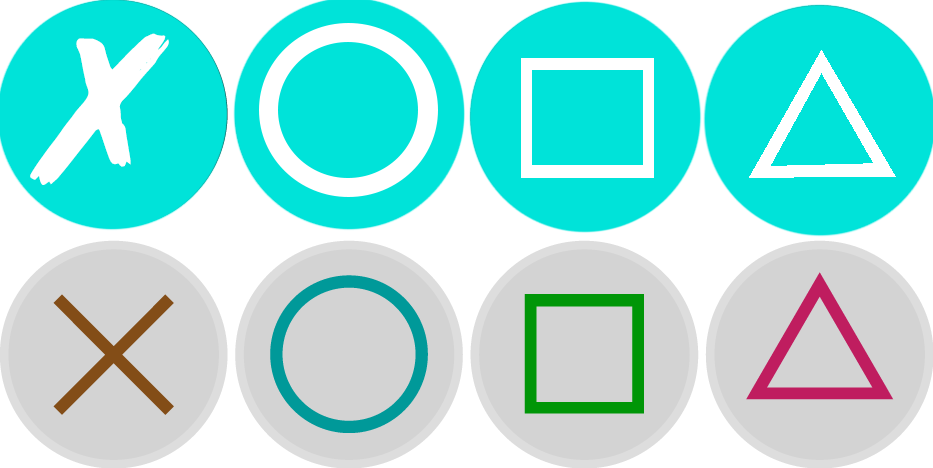
<style>
.page{position:relative;width:933px;height:468px;background:#00e3d9}
.page>*{position:absolute;margin:0}
.t1{font:205.7px "KinderBoy-Italic";color:#ffffff}
</style>
<div class="page">
<p class="t1" style="left:30px;top:33px;width:139px;height:152px">X</p>
</div>
